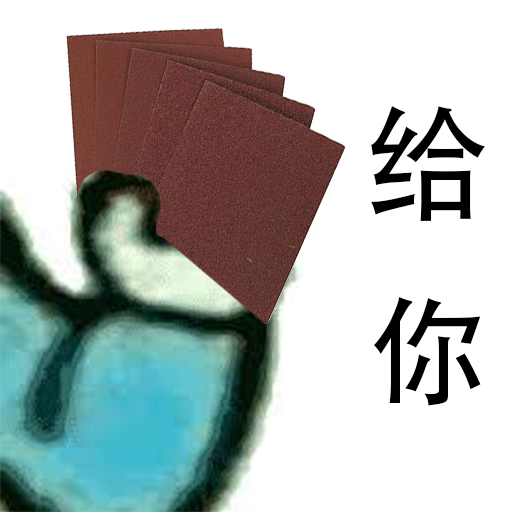
<style>
.page{position:relative;width:512px;height:512px;background:#ffffff}
.page>*{position:absolute;margin:0}
.t1{font:124.3px "AdobeHeitiStd-Regular";color:#000000}
.t2{font:118px "AdobeHeitiStd-Regular";color:#000000}
</style>
<div class="page">
<p class="t1" style="left:371px;top:106px;width:114px;height:115px">给</p>
<p class="t2" style="left:374px;top:296px;width:107px;height:110px">你</p>
</div>
